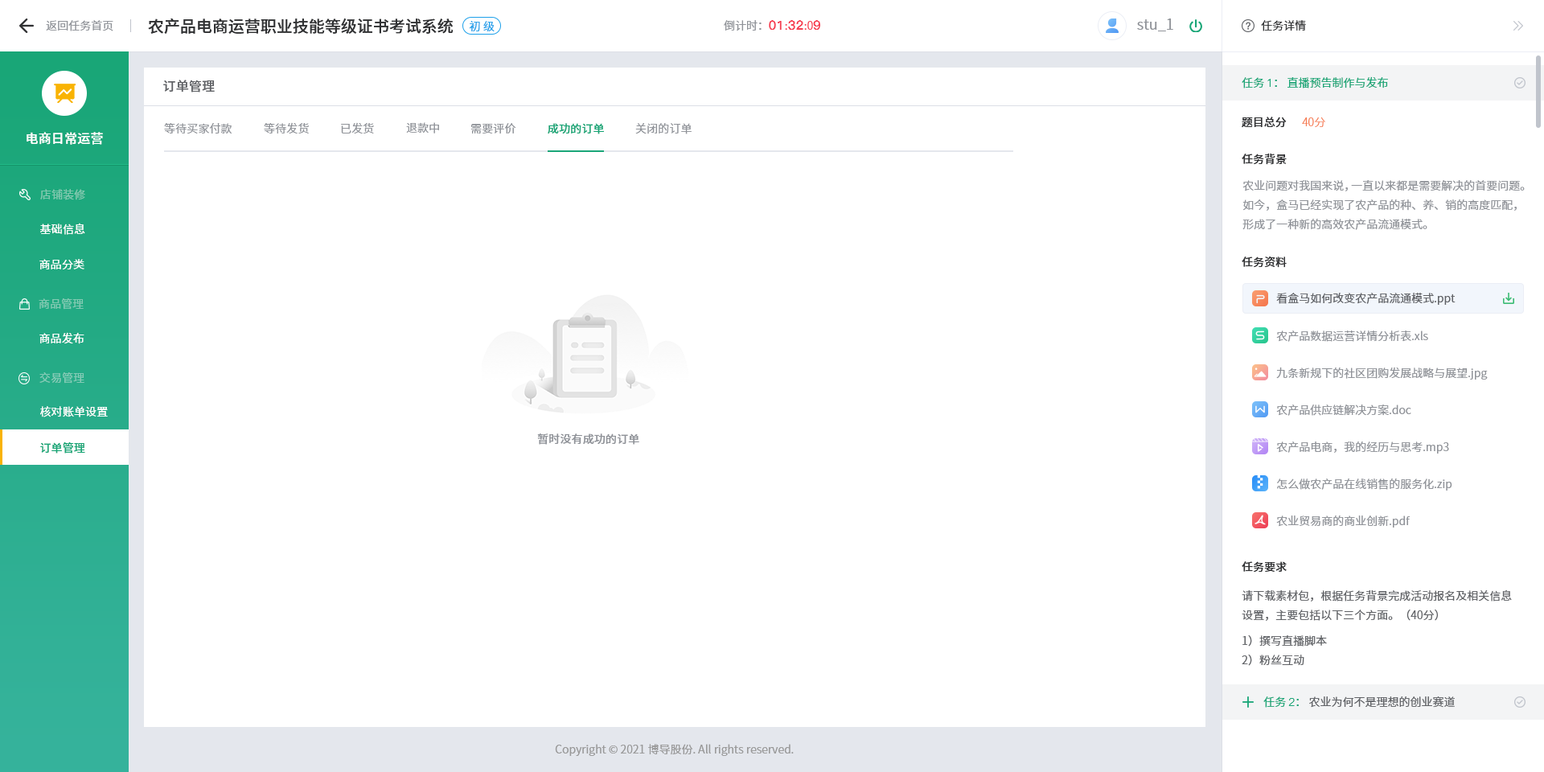
<style>
.page{position:relative;width:1544px;height:772px;background:#ffffff}
.page>*{position:absolute;margin:0}
.t1{font:16.1px "SourceHanSansCN-Medium";color:#303133}
.t2{font:11.3px "SourceHanSansCN-Normal";color:#909399}
.t3{font:11.3px "SourceHanSansCN-Normal";color:#1da0ea}
.t4{font:12.9px "PingFang-SC-Heavy";color:#f63f52}
.t5{font:11.3px "SourceHanSansCN-Normal";color:#f63f52}
.t6{font:14.5px "SourceHanSansCN-Normal";color:#909399}
.t7{font:11.3px "SourceHanSansCN-Normal";color:#303133}
.t8{font:11.3px "SourceHanSansCN-Normal";color:#19a677}
.t9{font:11.3px "PingFang-SC-Medium";color:#19a677}
.t10{font:12.9px "SourceHanSansCN-Medium";letter-spacing:0.01em;color:#606266}
.t11{font:11.3px "SourceHanSansCN-Normal";letter-spacing:0.01em;color:#909399}
.t12{font:11.3px "SourceHanSansCN-Medium";letter-spacing:0.01em;color:#19a677}
.t13{font:11.3px "SourceHanSansCN-Medium";color:#303133}
.t14{font:11.3px "SourceHanSansCN-Light";color:#f67d53}
.t15{font:12.9px "SourceHanSansCN-Medium";letter-spacing:0.01em;color:#ffffff}
.t16{font:11.3px/19.3px "SourceHanSansCN-Normal";color:#909399}
.t17{font:11.3px "SourceHanSansCN-Regular";letter-spacing:0.01em;color:#81c9b0}
.t18{font:11.3px "SourceHanSansCN-Normal";letter-spacing:0.01em;color:#ffffff}
.t19{font:11.3px "SourceHanSansCN-Normal";color:#606266}
.t20{font:11.3px "SourceHanSansCN-Regular";letter-spacing:0.01em;color:#82cab3}
.t21{font:11.3px "SourceHanSansCN-Regular";letter-spacing:0.01em;color:#ffffff}
.t22{font:11.3px "SourceHanSansCN-Regular";letter-spacing:0.01em;color:#83cbb6}
.t23{font:11.3px "SourceHanSansCN-Medium";letter-spacing:0.01em;color:#909399}
.t24{font:11.3px/19.3px "SourceHanSansCN-Normal";color:#606266}
.t25{font:11.3px "PingFang-SC-Medium";color:#1aa678}
.t26{font:11.3px "SourceHanSansCN-Normal";color:#1aa678}
.t27{font:11.3px "SourceHanSansCN-Normal";color:#999999}
</style>
<div class="page">
<p class="t1" style="left:148px;top:18px;width:306px;height:16px">农产品电商运营职业技能等级证书考试系统</p>
<p class="t2" style="left:46px;top:20px;width:67px;height:11px">返回任务首页</p>
<p class="t3" style="left:469px;top:21px;width:26px;height:11px">初 级</p>
<p class="t2" style="left:724px;top:20px;width:96px;height:11px">倒计时：<span class="t4">01</span><span class="t5">:</span><span class="t4">32</span><span class="t5">:0</span><span class="t4">9</span></p>
<p class="t6" style="left:1137px;top:18px;width:37px;height:13px">stu_1</p>
<p class="t7" style="left:1261px;top:20px;width:45px;height:11px">任务详情</p>
<p class="t8" style="left:1242px;top:76px;width:146px;height:12px">任务 <span class="t9">1</span>： 直播预告制作与发布</p>
<p class="t10" style="left:163px;top:80px;width:52px;height:12px">订单管理</p>
<p class="t11" style="left:164px;top:123px;width:68px;height:11px">等待买家付款</p>
<p class="t11" style="left:264px;top:122px;width:45px;height:12px">等待发货</p>
<p class="t11" style="left:341px;top:122px;width:33px;height:12px">已发货</p>
<p class="t11" style="left:406px;top:122px;width:33px;height:12px">退款中</p>
<p class="t11" style="left:471px;top:123px;width:45px;height:11px">需要评价</p>
<p class="t12" style="left:548px;top:123px;width:56px;height:11px">成功的订单</p>
<p class="t11" style="left:635px;top:123px;width:57px;height:11px">关闭的订单</p>
<p class="t13" style="left:1242px;top:117px;width:45px;height:11px">题目总分</p>
<p class="t14" style="left:1302px;top:117px;width:24px;height:10px">40分</p>
<p class="t15" style="left:27px;top:132px;width:76px;height:13px">电商日常运营</p>
<p class="t13" style="left:1242px;top:153px;width:45px;height:12px">任务背景</p>
<p class="t16" style="left:1243px;top:180px;width:282px;height:50px">农业问题对我国来说，一直以来都是需要解决的首要问题。如今，盒马已经实现了农产品的种、养、销的高度匹配，形成了一种新的高效农产品流通模式。</p>
<p class="t17" style="left:40px;top:189px;width:45px;height:11px">店铺装修</p>
<p class="t18" style="left:40px;top:223px;width:45px;height:12px">基础信息</p>
<p class="t13" style="left:1242px;top:256px;width:45px;height:12px">任务资料</p>
<p class="t18" style="left:39px;top:259px;width:45px;height:10px">商品分类</p>
<p class="t19" style="left:1276px;top:293px;width:180px;height:12px">看盒马如何改变农产品流通模式.ppt</p>
<p class="t20" style="left:39px;top:298px;width:45px;height:12px">商品管理</p>
<p class="t21" style="left:39px;top:332px;width:45px;height:12px">商品发布</p>
<p class="t2" style="left:1276px;top:331px;width:152px;height:11px">农产品数据运营详情分析表.xls</p>
<p class="t22" style="left:39px;top:372px;width:45px;height:12px">交易管理</p>
<p class="t2" style="left:1276px;top:367px;width:212px;height:13px">九条新规下的社区团购发展战略与展望.jpg</p>
<p class="t18" style="left:40px;top:406px;width:68px;height:11px">核对账单设置</p>
<p class="t2" style="left:1276px;top:405px;width:136px;height:11px">农产品供应链解决方案.doc</p>
<p class="t23" style="left:537px;top:434px;width:102px;height:11px">暂时没有成功的订单</p>
<p class="t12" style="left:40px;top:442px;width:45px;height:12px">订单管理</p>
<p class="t2" style="left:1276px;top:442px;width:173px;height:12px">农产品电商，我的经历与思考.mp3</p>
<p class="t2" style="left:1277px;top:479px;width:176px;height:12px">怎么做农产品在线销售的服务化.zip</p>
<p class="t2" style="left:1276px;top:516px;width:135px;height:12px">农业贸易商的商业创新.pdf</p>
<p class="t13" style="left:1242px;top:561px;width:45px;height:12px">任务要求</p>
<p class="t24" style="left:1242px;top:590px;width:270px;height:76px">请下载素材包，根据任务背景完成活动报名及相关信息设置，主要包括以下三个方面。（40分）<br>1）撰写直播脚本<br>2）粉丝互动</p>
<p class="t19" style="left:1264px;top:697px;width:191px;height:11px"><span class="t8">任务 </span><span class="t25">2</span><span class="t26">：</span> 农业为何不是理想的创业赛道</p>
<p class="t27" style="left:555px;top:744px;width:239px;height:12px">Copyright © 2021 博导股份. All rights reserved.</p>
</div>
